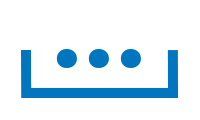
<style>
.page{position:relative;width:200px;height:120px;background:#ffffff}
.page>*{position:absolute;margin:0}
.t1{font:137px "NoyhGeometricSlim-Heavy";letter-spacing:-0.04em;color:#0176bf;scale:1.08 1}
</style>
<div class="page">
<p class="t1" style="left:56px;top:49px;width:85px;height:19px">...</p>
</div>
